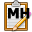
<style>
.page{position:relative;width:32px;height:32px;background:#ffffff}
.page>*{position:absolute;margin:0}
.t1{font:14px "Tahoma-Bold";color:#000000}
</style>
<div class="page">
<p class="t1" style="left:8px;top:8px;width:22px;height:11px">MH</p>
</div>
